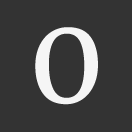
<style>
.page{position:relative;width:132px;height:132px;background:#333333}
.page>*{position:absolute;margin:0}
.t1{font:120px "Merriweather-Regular";letter-spacing:-0.06em;color:#f5f5f5}
</style>
<div class="page">
<p class="t1" style="left:35px;top:27px;width:63px;height:78px">0</p>
</div>
